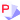
<style>
.page{position:relative;width:20px;height:20px;background:#fafaff}
.page>*{position:absolute;margin:0}
.t1{font:12px "MS-Gothic";color:#ff203a}
</style>
<div class="page">
<p class="t1" style="left:2px;top:4px;width:7px;height:9px">Ｐ</p>
</div>
